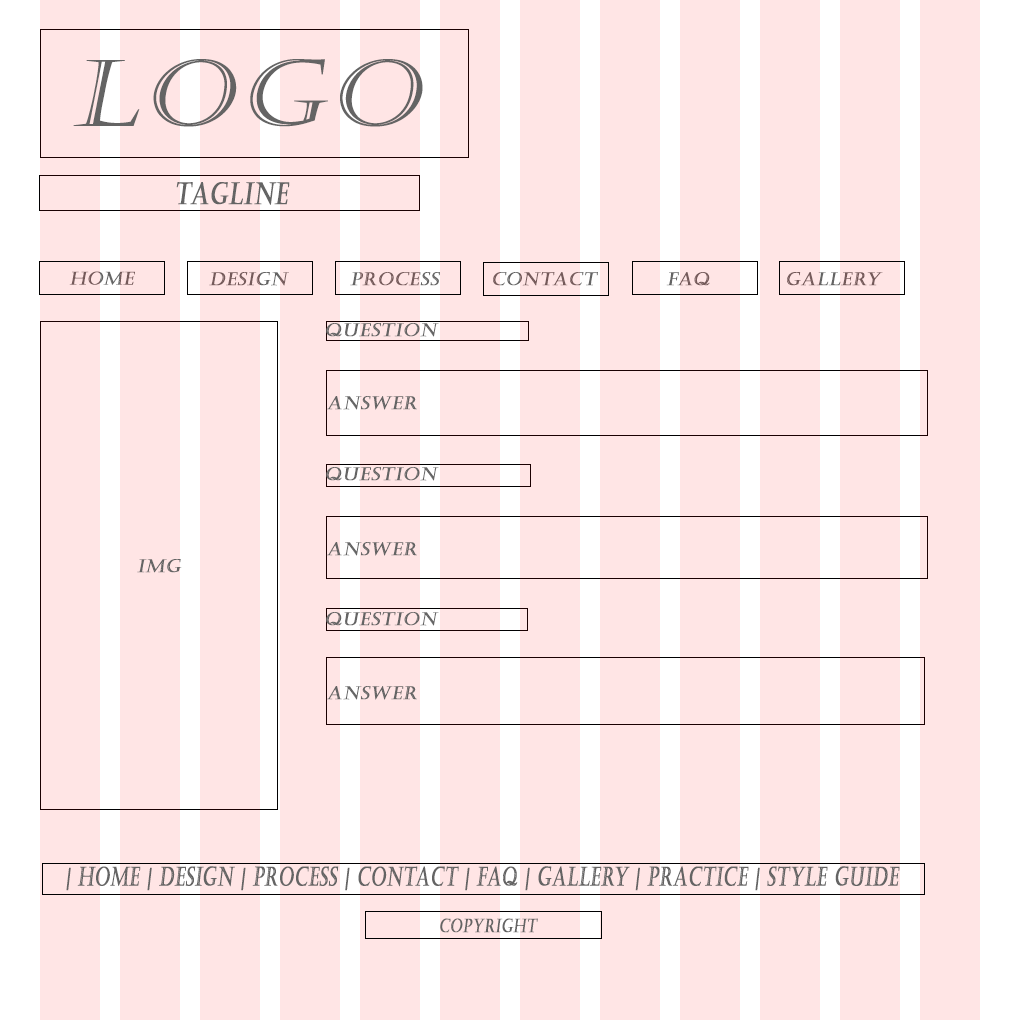
<style>
.page{position:relative;width:1020px;height:1020px;background:#ffe5e5}
.page>*{position:absolute;margin:0}
.t1{font:91.9px "Castellar";letter-spacing:0.04em;color:#646464;font-weight:bold;font-style:italic;scale:1.12 1}
.t2{font:29.9px "Castellar";letter-spacing:0.04em;color:#646464;font-weight:bold;font-style:italic;scale:0.73 1}
.t3{font:18px "Castellar";letter-spacing:0.04em;color:#646464;font-weight:bold;font-style:italic}
.t4{font:26px "Castellar";letter-spacing:0.04em;color:#646464;font-weight:bold;font-style:italic;scale:0.65 1}
.t5{font:18.6px "Castellar";letter-spacing:0.04em;color:#646464;font-weight:bold;font-style:italic;scale:0.73 1}
</style>
<div class="page">
<p class="t1" style="left:73px;top:59px;width:350px;height:68px">Logo</p>
<p class="t2" style="left:176px;top:182px;width:114px;height:23px">TagLine</p>
<p class="t3" style="left:69px;top:271px;width:66px;height:14px">Home</p>
<p class="t3" style="left:209px;top:272px;width:80px;height:14px">Design</p>
<p class="t3" style="left:350px;top:272px;width:90px;height:14px">Process</p>
<p class="t3" style="left:493px;top:272px;width:105px;height:14px">Contact</p>
<p class="t3" style="left:666px;top:272px;width:44px;height:14px">FAQ</p>
<p class="t3" style="left:787px;top:272px;width:96px;height:14px">Gallery</p>
<p class="t3" style="left:326px;top:323px;width:113px;height:14px">Question</p>
<p class="t3" style="left:326px;top:396px;width:91px;height:14px">Answer</p>
<p class="t3" style="left:326px;top:467px;width:113px;height:14px">Question</p>
<p class="t3" style="left:326px;top:542px;width:91px;height:14px">Answer</p>
<p class="t3" style="left:137px;top:559px;width:45px;height:14px">IMG</p>
<p class="t3" style="left:326px;top:612px;width:113px;height:14px">Question</p>
<p class="t3" style="left:326px;top:686px;width:91px;height:14px">Answer</p>
<p class="t4" style="left:66px;top:866px;width:834px;height:25px">| home | Design | process | Contact | FAQ | Gallery | practice | Style Guide</p>
<p class="t5" style="left:440px;top:918px;width:98px;height:15px">Copyright</p>
</div>
